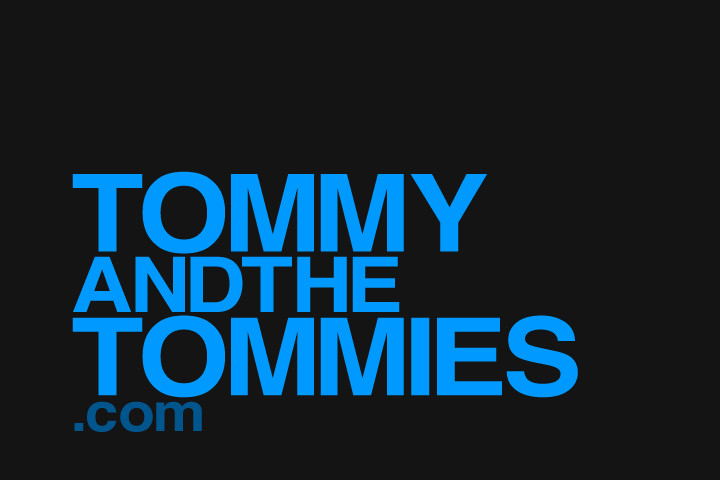
<style>
.page{position:relative;width:720px;height:480px;background:#141414}
.page>*{position:absolute;margin:0}
.t1{font:107.2px/83.1px "Helvetica-Bold";letter-spacing:-0.1em;color:#0099ff;text-transform:uppercase;scale:1.11 1}
.t2{font:107.2px/67px "Helvetica-Bold";letter-spacing:-0.1em;color:#0099ff;text-transform:uppercase;scale:1.11 1}
.t3{font:76.8px/60.7px "Helvetica-Bold";letter-spacing:-0.1em;color:#0099ff;text-transform:uppercase;scale:1.11 1}
.t4{font:53.6px/35.7px "Helvetica-Bold";letter-spacing:-0.1em;color:#00558d;scale:1.11 1}
</style>
<div class="page">
<p class="t1" style="left:72px;top:171px;width:506px;height:261px"><span class="t2">Tommy<br></span><span class="t3">AndThe<br></span>Tommies<br><span class="t4">.com</span></p>
</div>
